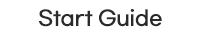
<style>
.page{position:relative;width:210px;height:35px;background:#ffffff}
.page>*{position:absolute;margin:0}
.t1{font:20px "GmarketSansMedium";letter-spacing:-0.025em;color:#2a2a2a;font-weight:bold}
</style>
<div class="page">
<p class="t1" style="left:39px;top:9px;width:123px;height:18px">Start Guide</p>
</div>
